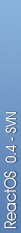
<style>
.page{position:relative;width:21px;height:233px}
.page>*{position:absolute;margin:0}
.t1{font:14px "AvantGardeITCbyBT-Book";color:#ffffff;scale:0.93 1}
.t2{font:16px "AvantGardeITCbyBT-Book";color:#ffffff;scale:0.93 1}
</style>
<div class="page">
<p class="t1" style="left:4px;top:112px;width:13px;height:117px;rotate:-90deg"><span class="t2">ReactOS</span>  0.4 - SVN</p>
</div>
